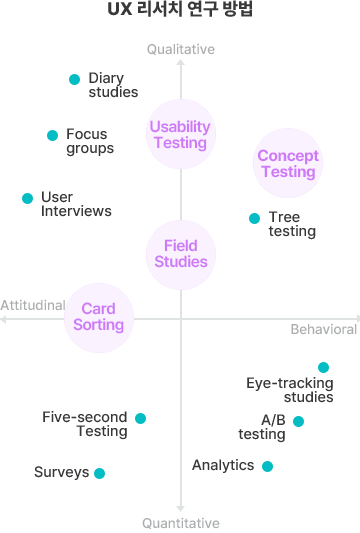
<style>
.page{position:relative;width:360px;height:533px;background:#ffffff}
.page>*{position:absolute;margin:0}
.t1{font:18px "Pretendard-ExtraBold";color:#393939;text-transform:uppercase}
.t2{font:14px "Pretendard-Medium";color:#abadaf}
.t3{font:15px/14px "Pretendard-Medium";color:#373737}
.t4{font:16px/16px "Pretendard-SemiBold";letter-spacing:-0.025em;color:#ce7af8}
.t5{font:16px/16px "Pretendard-Bold";letter-spacing:-0.025em;color:#ce7af8}
.t6{font:15px "Pretendard-Medium";color:#373737}
</style>
<div class="page">
<p class="t1" style="left:108px;top:0px;width:144px;height:17px">UX 리서치 연구 방법</p>
<p class="t2" style="left:147px;top:43px;width:68px;height:12px">Qualitative</p>
<p class="t3" style="left:89px;top:72px;width:49px;height:26px">Diary <br>studies</p>
<p class="t4" style="left:150px;top:120px;width:61px;height:32px;text-align:center">Usability<br>Testing</p>
<p class="t3" style="left:66px;top:128px;width:48px;height:29px">Focus <br>groups</p>
<p class="t5" style="left:258px;top:149px;width:61px;height:32px;text-align:center">Concept<br>Testing</p>
<p class="t3" style="left:42px;top:191px;width:70px;height:26px">User<br>Interviews</p>
<p class="t3" style="left:268px;top:211px;width:48px;height:29px">Tree<br>testing</p>
<p class="t4" style="left:154px;top:239px;width:54px;height:29px;text-align:center">Field<br>Studies</p>
<p class="t2" style="left:0px;top:299px;width:65px;height:12px">Attitudinal</p>
<p class="t4" style="left:73px;top:302px;width:51px;height:32px;text-align:center">Card<br>Sorting</p>
<p class="t2" style="left:291px;top:323px;width:66px;height:12px">Behavioral</p>
<p class="t3" style="left:247px;top:377px;width:86px;height:26px;text-align:right">Eye-tracking<br>studies</p>
<p class="t3" style="left:43px;top:411px;width:84px;height:29px;text-align:right">Five-second<br>Testing</p>
<p class="t3" style="left:238px;top:414px;width:47px;height:29px;text-align:right">A/B<br>testing</p>
<p class="t6" style="left:192px;top:459px;width:62px;height:14px">Analytics</p>
<p class="t6" style="left:34px;top:466px;width:55px;height:14px">Surveys</p>
<p class="t2" style="left:142px;top:517px;width:78px;height:12px">Quantitative</p>
</div>
